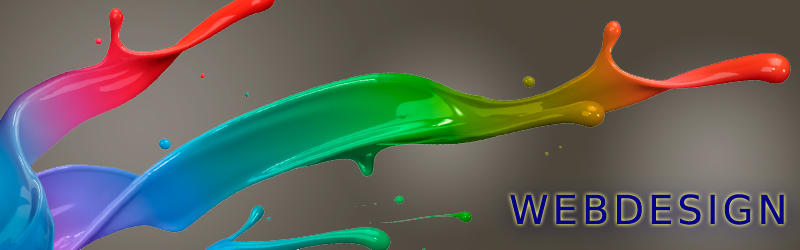
<style>
.page{position:relative;width:800px;height:250px}
.page>*{position:absolute;margin:0}
.t1{font:40px "DejaVuSans";letter-spacing:0.1em;color:#060386}
</style>
<div class="page">
<p class="t1" style="left:510px;top:194px;width:274px;height:31px">WEBDESIGN</p>
</div>
